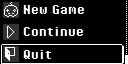
<style>
.page{position:relative;width:128px;height:64px;background:#000000}
.page>*{position:absolute;margin:0}
.t1{font:16px "PixelOperator-Bold";color:#ffffff}
</style>
<div class="page">
<p class="t1" style="left:23px;top:5px;width:61px;height:9px">New Game</p>
<p class="t1" style="left:23px;top:27px;width:60px;height:9px">Continue</p>
<p class="t1" style="left:23px;top:50px;width:28px;height:9px">Quit</p>
</div>
